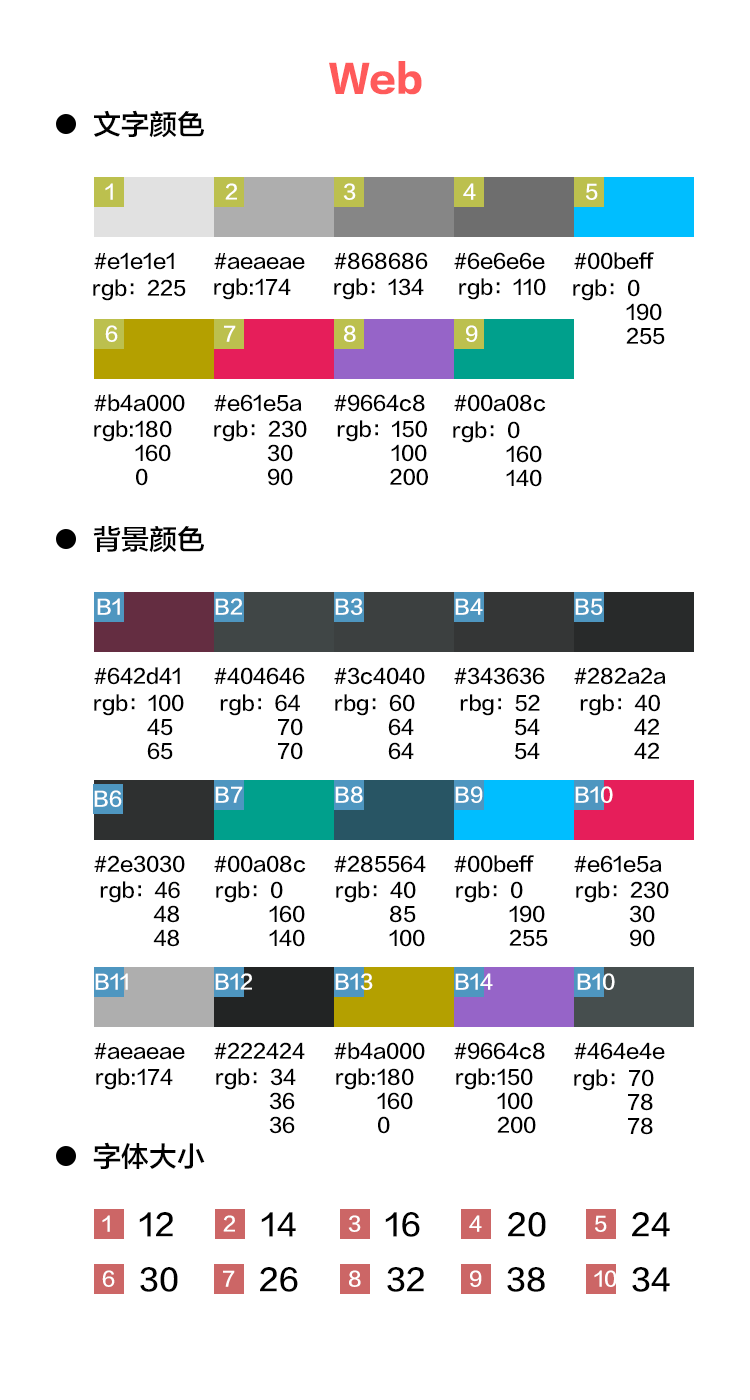
<style>
.page{position:relative;width:750px;height:1400px;background:#ffffff}
.page>*{position:absolute;margin:0}
.t1{font:36px "FZLTTHK--GBK1-0";color:#ff5a5a}
.t2{font:28px "FZLTZHK--GBK1-0";color:#000000}
.t3{font:20px "FZLTZHK--GBK1-0";color:#ffffff}
.t4{font:20px "FZLTZHK--GBK1-0";color:#000000}
.t5{font:30px "FZLTZHK--GBK1-0";color:#000000}
</style>
<div class="page">
<p class="t1" style="left:329px;top:61px;width:93px;height:34px">Web</p>
<p class="t2" style="left:94px;top:110px;width:110px;height:28px">文字颜色</p>
<p class="t3" style="left:105px;top:183px;width:8px;height:17px">1</p>
<p class="t3" style="left:225px;top:183px;width:12px;height:17px">2</p>
<p class="t3" style="left:343px;top:183px;width:13px;height:17px">3</p>
<p class="t3" style="left:463px;top:183px;width:13px;height:17px">4</p>
<p class="t3" style="left:586px;top:183px;width:12px;height:17px">5</p>
<p class="t4" style="left:94px;top:252px;width:80px;height:18px">#e1e1e1</p>
<p class="t4" style="left:214px;top:253px;width:91px;height:17px">#aeaeae</p>
<p class="t4" style="left:334px;top:252px;width:94px;height:18px">#868686</p>
<p class="t4" style="left:454px;top:252px;width:91px;height:18px">#6e6e6e</p>
<p class="t4" style="left:574px;top:252px;width:80px;height:18px">#00beff</p>
<p class="t4" style="left:93px;top:279px;width:93px;height:22px">rgb：225</p>
<p class="t4" style="left:214px;top:278px;width:77px;height:22px">rgb:174</p>
<p class="t4" style="left:334px;top:278px;width:90px;height:22px">rgb：134</p>
<p class="t4" style="left:459px;top:278px;width:87px;height:22px">rgb：110</p>
<p class="t4" style="left:573px;top:279px;width:92px;height:66px">rgb：0<br>         190<br>         255</p>
<p class="t3" style="left:105px;top:325px;width:13px;height:17px">6</p>
<p class="t3" style="left:224px;top:325px;width:12px;height:17px">7</p>
<p class="t3" style="left:344px;top:325px;width:12px;height:17px">8</p>
<p class="t3" style="left:466px;top:325px;width:12px;height:17px">9</p>
<p class="t4" style="left:94px;top:394px;width:91px;height:18px">#b4a000</p>
<p class="t4" style="left:214px;top:394px;width:88px;height:18px">#e61e5a</p>
<p class="t4" style="left:334px;top:394px;width:91px;height:18px">#9664c8</p>
<p class="t4" style="left:454px;top:394px;width:92px;height:18px">#00a08c</p>
<p class="t4" style="left:94px;top:420px;width:78px;height:66px">rgb:180<br>       160<br>       0</p>
<p class="t4" style="left:214px;top:420px;width:93px;height:66px">rgb：230<br>         30<br>         90</p>
<p class="t4" style="left:337px;top:420px;width:91px;height:66px;text-align:center">rgb：150<br>         100<br>         200</p>
<p class="t4" style="left:453px;top:421px;width:89px;height:66px">rgb：0<br>         160<br>         140</p>
<p class="t2" style="left:93px;top:526px;width:111px;height:27px">背景颜色</p>
<p class="t3" style="left:97px;top:598px;width:23px;height:17px">B1</p>
<p class="t3" style="left:215px;top:598px;width:27px;height:17px">B2</p>
<p class="t3" style="left:335px;top:598px;width:28px;height:17px">B3</p>
<p class="t3" style="left:455px;top:598px;width:28px;height:17px">B4</p>
<p class="t3" style="left:575px;top:598px;width:28px;height:17px">B5</p>
<p class="t4" style="left:94px;top:667px;width:86px;height:18px">#642d41</p>
<p class="t4" style="left:214px;top:667px;width:91px;height:18px">#404646</p>
<p class="t4" style="left:334px;top:667px;width:91px;height:18px">#3c4040</p>
<p class="t4" style="left:454px;top:667px;width:91px;height:18px">#343636</p>
<p class="t4" style="left:574px;top:667px;width:92px;height:18px">#282a2a</p>
<p class="t4" style="left:94px;top:694px;width:90px;height:66px">rgb：100<br>         45<br>         65</p>
<p class="t4" style="left:220px;top:694px;width:83px;height:66px;text-align:center">rgb：64<br>          70<br>          70</p>
<p class="t4" style="left:335px;top:694px;width:80px;height:66px">rbg：60<br>         64<br>         64</p>
<p class="t4" style="left:460px;top:694px;width:80px;height:66px;text-align:center">rbg：52<br>         54<br>         54</p>
<p class="t4" style="left:580px;top:694px;width:80px;height:65px;text-align:center">rgb：40<br>         42<br>         42</p>
<p class="t3" style="left:94px;top:790px;width:28px;height:17px">B6</p>
<p class="t3" style="left:215px;top:786px;width:28px;height:17px">B7</p>
<p class="t3" style="left:335px;top:786px;width:28px;height:17px">B8</p>
<p class="t3" style="left:455px;top:786px;width:28px;height:17px">B9</p>
<p class="t3" style="left:575px;top:786px;width:38px;height:17px">B10</p>
<p class="t4" style="left:94px;top:855px;width:91px;height:18px">#2e3030</p>
<p class="t4" style="left:214px;top:855px;width:92px;height:18px">#00a08c</p>
<p class="t4" style="left:334px;top:855px;width:92px;height:18px">#285564</p>
<p class="t4" style="left:454px;top:855px;width:80px;height:18px">#00beff</p>
<p class="t4" style="left:574px;top:855px;width:88px;height:18px">#e61e5a</p>
<p class="t4" style="left:100px;top:881px;width:80px;height:66px;text-align:center">rgb：46<br>         48<br>         48</p>
<p class="t4" style="left:216px;top:881px;width:89px;height:66px">rgb：0<br>         160<br>         140</p>
<p class="t4" style="left:336px;top:881px;width:89px;height:66px">rgb：40<br>         85<br>         100</p>
<p class="t4" style="left:456px;top:881px;width:92px;height:66px">rgb：0<br>         190<br>         255</p>
<p class="t4" style="left:576px;top:881px;width:93px;height:66px">rgb：230<br>         30<br>         90</p>
<p class="t3" style="left:95px;top:973px;width:33px;height:17px">B11</p>
<p class="t3" style="left:215px;top:973px;width:37px;height:17px">B12</p>
<p class="t3" style="left:335px;top:973px;width:38px;height:17px">B13</p>
<p class="t3" style="left:455px;top:973px;width:38px;height:17px">B14</p>
<p class="t3" style="left:577px;top:973px;width:38px;height:17px">B10</p>
<p class="t4" style="left:94px;top:1043px;width:91px;height:17px">#aeaeae</p>
<p class="t4" style="left:214px;top:1042px;width:91px;height:17px">#222424</p>
<p class="t4" style="left:334px;top:1042px;width:91px;height:18px">#b4a000</p>
<p class="t4" style="left:454px;top:1042px;width:91px;height:18px">#9664c8</p>
<p class="t4" style="left:574px;top:1042px;width:91px;height:18px">#464e4e</p>
<p class="t4" style="left:96px;top:1068px;width:77px;height:22px">rgb:174</p>
<p class="t4" style="left:216px;top:1068px;width:80px;height:66px">rgb：34<br>         36<br>         36</p>
<p class="t4" style="left:336px;top:1068px;width:78px;height:66px">rgb:180<br>       160<br>       0</p>
<p class="t4" style="left:456px;top:1068px;width:80px;height:66px">rgb:150<br>       100<br>       200</p>
<p class="t4" style="left:574px;top:1069px;width:80px;height:66px">rgb：70<br>         78<br>         78</p>
<p class="t2" style="left:93px;top:1142px;width:112px;height:27px">字体大小</p>
<p class="t3" style="left:102px;top:1215px;width:8px;height:17px">1</p>
<p class="t5" style="left:139px;top:1212px;width:34px;height:25px">12</p>
<p class="t3" style="left:223px;top:1215px;width:12px;height:17px">2</p>
<p class="t5" style="left:261px;top:1212px;width:35px;height:25px">14</p>
<p class="t3" style="left:348px;top:1215px;width:13px;height:17px">3</p>
<p class="t5" style="left:385px;top:1212px;width:35px;height:25px">16</p>
<p class="t3" style="left:469px;top:1215px;width:13px;height:17px">4</p>
<p class="t5" style="left:508px;top:1212px;width:38px;height:25px">20</p>
<p class="t3" style="left:595px;top:1215px;width:12px;height:17px">5</p>
<p class="t5" style="left:632px;top:1212px;width:38px;height:25px">24</p>
<p class="t3" style="left:102px;top:1270px;width:13px;height:17px">6</p>
<p class="t5" style="left:140px;top:1267px;width:38px;height:25px">30</p>
<p class="t3" style="left:223px;top:1270px;width:12px;height:17px">7</p>
<p class="t5" style="left:260px;top:1267px;width:38px;height:25px">26</p>
<p class="t3" style="left:349px;top:1270px;width:12px;height:17px">8</p>
<p class="t5" style="left:387px;top:1267px;width:37px;height:25px">32</p>
<p class="t3" style="left:470px;top:1270px;width:12px;height:17px">9</p>
<p class="t5" style="left:507px;top:1267px;width:38px;height:25px">38</p>
<p class="t3" style="left:594px;top:1270px;width:23px;height:17px">10</p>
<p class="t5" style="left:632px;top:1267px;width:38px;height:25px">34</p>
</div>
